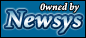
<style>
.page{position:relative;width:86px;height:38px;background:#006699}
.page>*{position:absolute;margin:0}
.t1{font:10px "Minion-BoldItalic";color:#ffffff}
.t2{font:24px "Minion-BoldItalic";font-weight:bold}
</style>
<div class="page">
<p class="t1" style="left:40px;top:2px;width:39px;height:11px">0wned by</p>
<p class="t2" style="left:5px;top:11px;width:77px;height:23px">Newsys</p>
</div>
